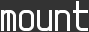
<style>
.page{position:relative;width:89px;height:32px;background:#333333}
.page>*{position:absolute;margin:0}
.t1{font:48px "Monkey";color:#ffffff}
</style>
<div class="page">
<p class="t1" style="left:1px;top:1px;width:87px;height:30px">mount</p>
</div>
